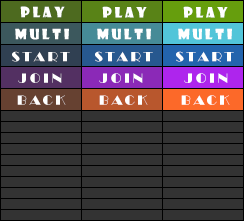
<style>
.page{position:relative;width:244px;height:221px;background:#333333}
.page>*{position:absolute;margin:0}
.t1{font:14px "ShowcardGothic-Reg";color:#ffffff}
.t2{font:14px "Broadway";letter-spacing:0.2em;color:#ffffff}
</style>
<div class="page">
<p class="t1" style="left:20px;top:6px;width:45px;height:12px">P l a y</p>
<p class="t1" style="left:102px;top:6px;width:45px;height:12px">P l a y</p>
<p class="t1" style="left:183px;top:6px;width:45px;height:12px">P l a y</p>
<p class="t1" style="left:15px;top:28px;width:54px;height:12px">M U L T I</p>
<p class="t1" style="left:97px;top:28px;width:54px;height:12px">M U L T I</p>
<p class="t1" style="left:178px;top:28px;width:54px;height:12px">M U L T I</p>
<p class="t2" style="left:12px;top:51px;width:58px;height:11px">START</p>
<p class="t2" style="left:95px;top:51px;width:58px;height:11px">START</p>
<p class="t2" style="left:176px;top:51px;width:58px;height:11px">START</p>
<p class="t2" style="left:18px;top:73px;width:44px;height:10px">JOIN</p>
<p class="t2" style="left:99px;top:73px;width:44px;height:10px">JOIN</p>
<p class="t2" style="left:184px;top:73px;width:44px;height:10px">JOIN</p>
<p class="t2" style="left:17px;top:95px;width:49px;height:10px">BACK</p>
<p class="t2" style="left:99px;top:95px;width:49px;height:10px">BACK</p>
<p class="t2" style="left:181px;top:95px;width:49px;height:10px">BACK</p>
</div>
